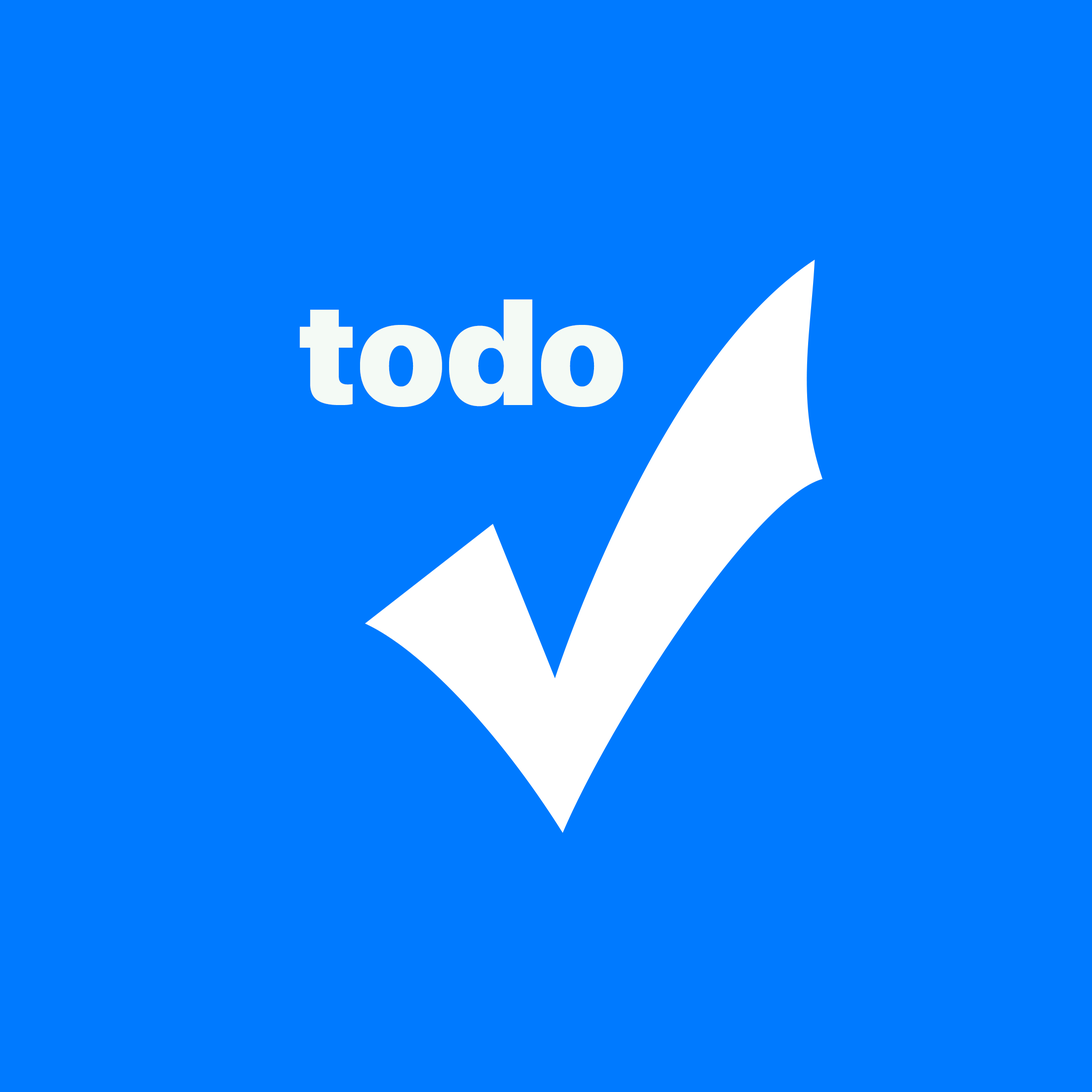
<style>
.page{position:relative;width:1092px;height:1092px;background:#007aff}
.page>*{position:absolute;margin:0}
.t1{font:142.4px "SFUIDisplay-Black";color:#f4faf5}
</style>
<div class="page">
<p class="t1" style="left:300px;top:299px;width:323px;height:108px">todo</p>
</div>
